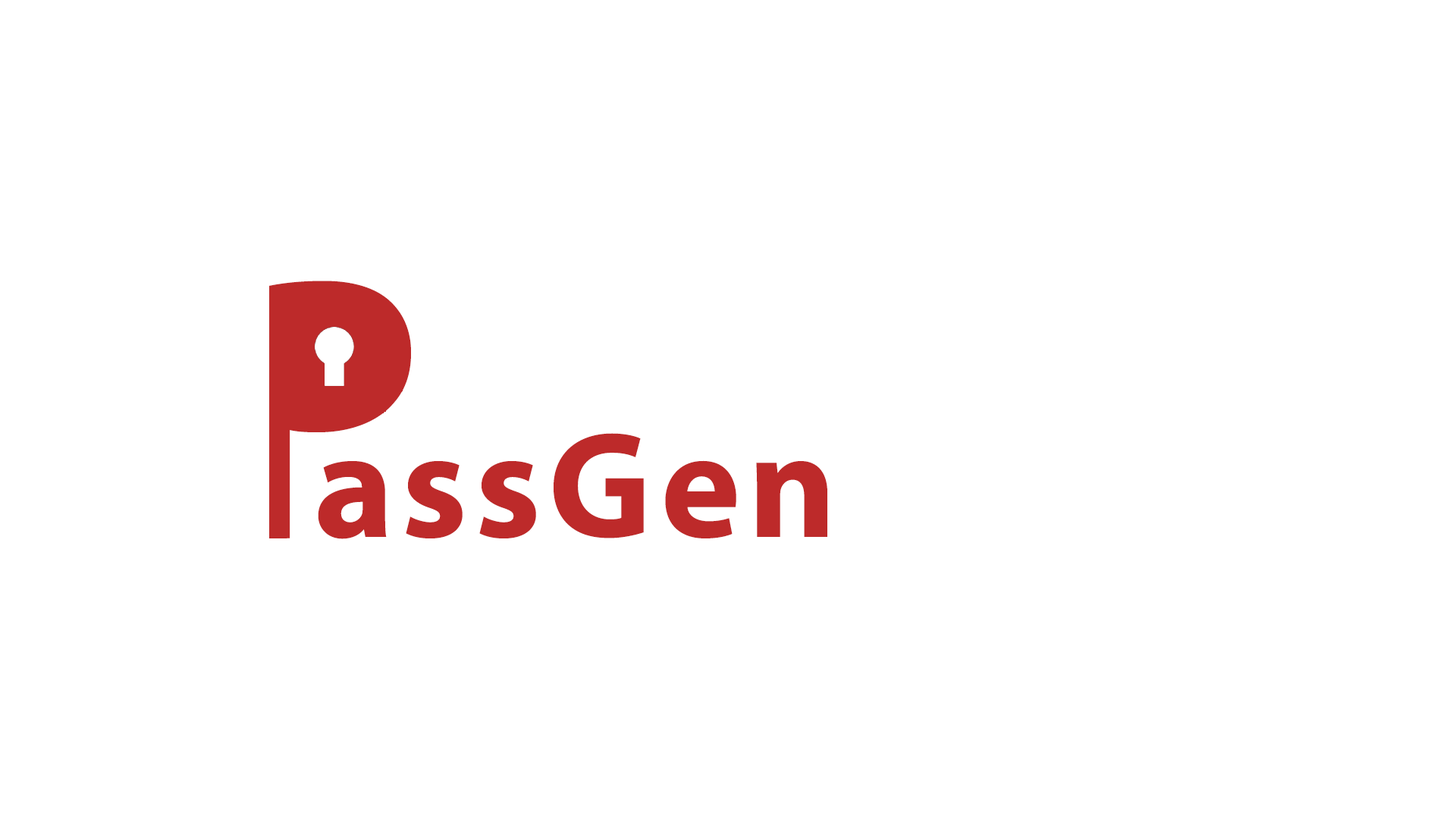
<style>
.page{position:relative;width:1456px;height:819px;background:#ffffff}
.page>*{position:absolute;margin:0}
.t1{font:379.2px "MyriadPro-Light";letter-spacing:0.05em;color:#bd2a2a}
.t2{font:151.7px "MyriadPro-Bold";letter-spacing:0.05em;color:#bd2a2a}
</style>
<div class="page">
<p class="t1" style="left:269px;top:281px;width:142px;height:257px">P</p>
<p class="t2" style="left:318px;top:433px;width:509px;height:106px">assGen</p>
</div>
